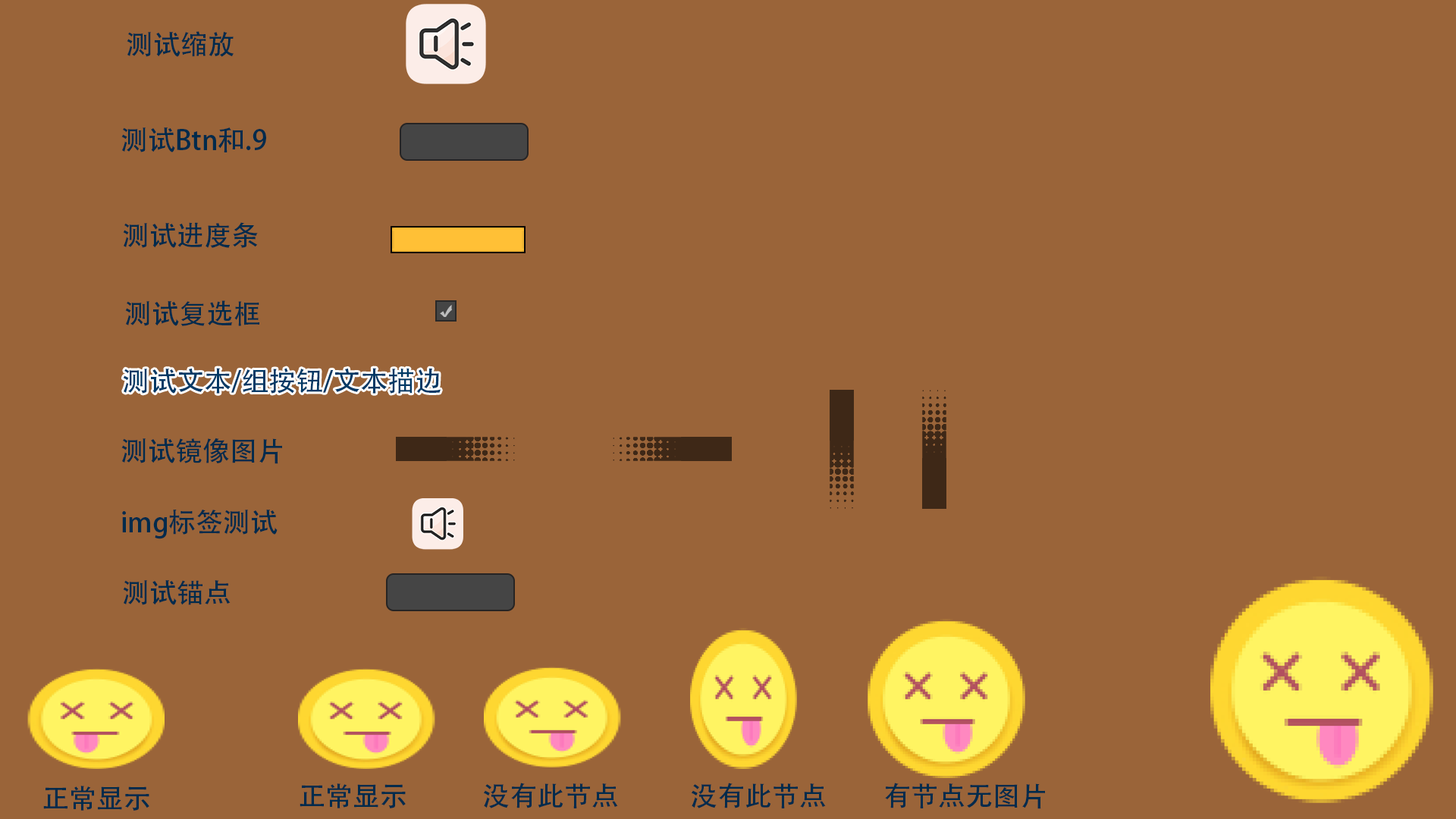
<style>
.page{position:relative;width:1456px;height:819px;background:#9a6439}
.page>*{position:absolute;margin:0}
.t1{font:27.3px "AdobeHeitiStd-Regular";color:#002b4c}
.t2{font:27.3px "AdobeHeitiStd-Regular";color:#003965}
</style>
<div class="page">
<p class="t1" style="left:127px;top:31px;width:107px;height:26px">测试缩放</p>
<p class="t1" style="left:121px;top:127px;width:145px;height:25px">测试Btn和.9</p>
<p class="t1" style="left:123px;top:222px;width:135px;height:26px">测试进度条</p>
<p class="t1" style="left:125px;top:300px;width:134px;height:26px">测试复选框</p>
<p class="t2" style="left:123px;top:368px;width:318px;height:26px">测试文本/组按钮/文本描边</p>
<p class="t1" style="left:121px;top:438px;width:161px;height:26px">测试镜像图片</p>
<p class="t1" style="left:122px;top:510px;width:156px;height:29px">img标签测试</p>
<p class="t1" style="left:123px;top:580px;width:108px;height:25px">测试锚点</p>
<p class="t1" style="left:43px;top:786px;width:106px;height:25px">正常显示</p>
<p class="t1" style="left:300px;top:783px;width:106px;height:25px">正常显示</p>
<p class="t1" style="left:484px;top:783px;width:134px;height:25px">没有此节点</p>
<p class="t1" style="left:692px;top:783px;width:134px;height:25px">没有此节点</p>
<p class="t1" style="left:885px;top:783px;width:160px;height:26px">有节点无图片</p>
</div>
